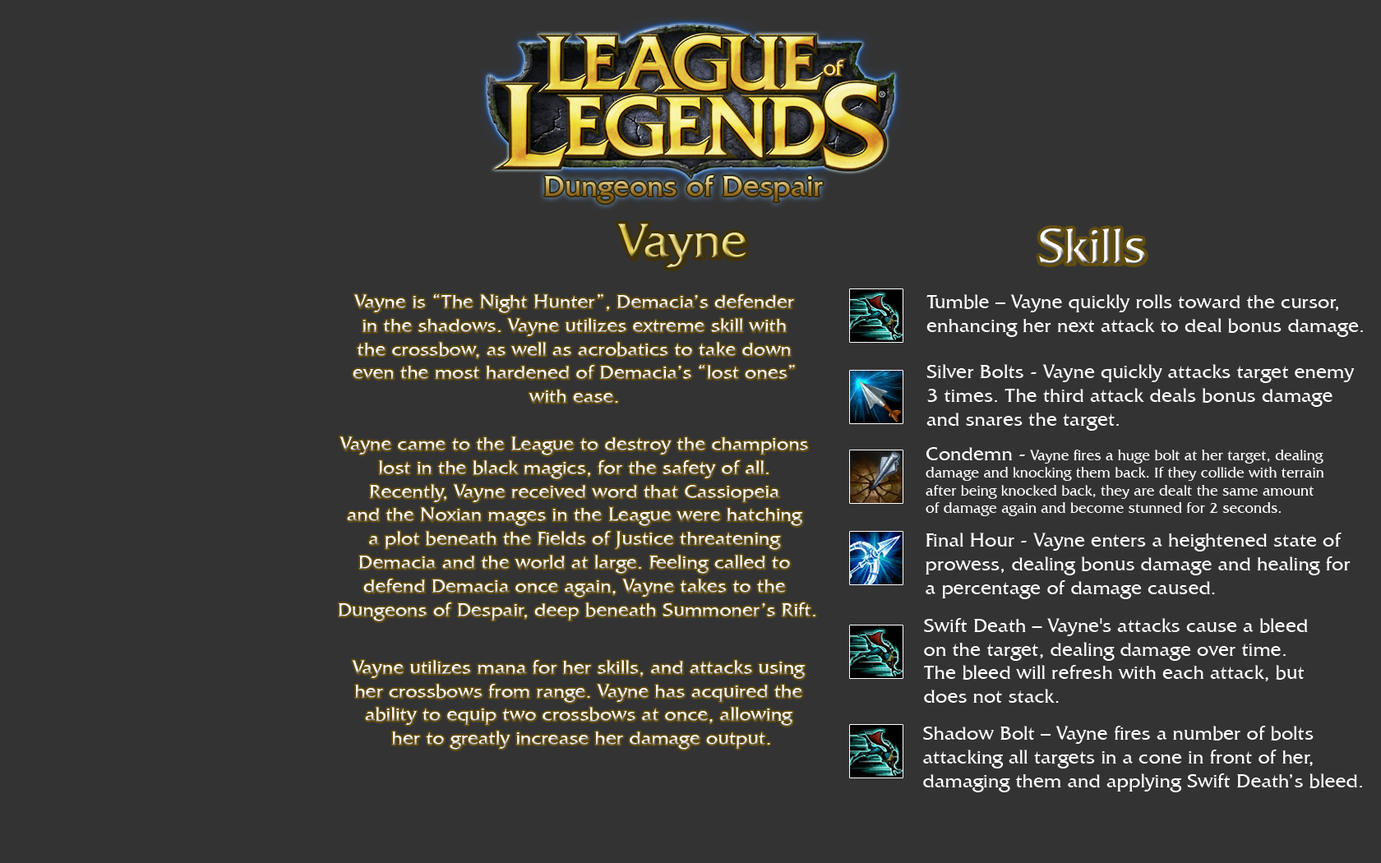
<style>
.page{position:relative;width:1381px;height:863px;background:#333333}
.page>*{position:absolute;margin:0}
.t1{font:49.4px "FrizQuadrataITCbyBT-Roman"}
.t2{font:19.7px "FrizQuadrataITCbyBT-Roman"}
.t3{font:19.7px "FrizQuadrataITCbyBT-Roman";color:#ffffff}
.t4{font:14.8px "FrizQuadrataITCbyBT-Roman";color:#ffffff}
</style>
<div class="page">
<p class="t1" style="left:618px;top:224px;width:129px;height:44px">Vayne</p>
<p class="t1" style="left:1039px;top:229px;width:106px;height:35px">Skills</p>
<p class="t2" style="left:339px;top:294px;width:477px;height:328px;text-align:center">Vayne is “The Night Hunter”, Demacia’s defender <br>in the shadows. Vayne utilizes extreme skill with <br>the crossbow, as well as acrobatics to take down <br>even the most hardened of Demacia’s “lost ones” <br>with ease. <br><br>Vayne came to the League to destroy the champions <br>lost in the black magics, for the safety of all. <br>Recently, Vayne received word that Cassiopeia <br>and the Noxian mages in the League were hatching <br>a plot beneath the Fields of Justice threatening <br>Demacia and the world at large. Feeling called to <br>defend Demacia once again, Vayne takes to the <br>Dungeons of Despair, deep beneath Summoner’s Rift.</p>
<p class="t3" style="left:927px;top:294px;width:436px;height:43px">Tumble – Vayne quickly rolls toward the cursor, <br>enhancing her next attack to deal bonus damage.</p>
<p class="t3" style="left:927px;top:364px;width:428px;height:67px">Silver Bolts - Vayne quickly attacks target enemy <br>3 times. The third attack deals bonus damage <br>and snares the target.</p>
<p class="t4" style="left:926px;top:447px;width:399px;height:69px"><span class="t3">Condemn -</span> Vayne fires a huge bolt at her target, dealing <br>damage and knocking them back. If they collide with terrain <br>after being knocked back, they are dealt the same amount <br>of damage again and become stunned for 2 seconds.</p>
<p class="t3" style="left:926px;top:533px;width:425px;height:66px">Final Hour - Vayne enters a heightened state of <br>prowess, dealing bonus damage and healing for <br>a percentage of damage caused.</p>
<p class="t3" style="left:923px;top:618px;width:385px;height:85px">Swift Death – Vayne's attacks cause a bleed <br>on the target, dealing damage over time. <br>The bleed will refresh with each attack, but <br>does not stack.</p>
<p class="t2" style="left:352px;top:660px;width:454px;height:90px;text-align:center">Vayne utilizes mana for her skills, and attacks using <br>her crossbows from range. Vayne has acquired the <br>ability to equip two crossbows at once, allowing <br>her to greatly increase her damage output.</p>
<p class="t3" style="left:923px;top:726px;width:439px;height:67px">Shadow Bolt – Vayne fires a number of bolts <br>attacking all targets in a cone in front of her,<br>damaging them and applying Swift Death’s bleed.</p>
</div>
